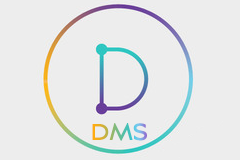
<style>
.page{position:relative;width:240px;height:160px;background:#ededed}
.page>*{position:absolute;margin:0}
.t1{font:28px "AvianoSans";font-weight:bold;scale:0.76 1}
</style>
<div class="page">
<p class="t1" style="left:92px;top:123px;width:55px;height:18px">DMS</p>
</div>
